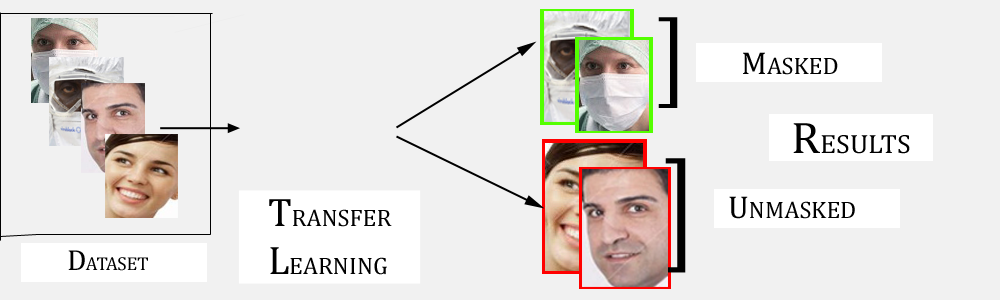
<style>
.page{position:relative;width:1000px;height:300px;background:#f1f1f1}
.page>*{position:absolute;margin:0}
.t1{font:99.9px "Cambria";color:#000000;scale:0.85 1}
.t2{font:24px "Cambria";color:#000000}
.t3{font:32px "Cambria";color:#000000}
.t4{font:26.7px "Cambria";color:#000000;scale:1.05 1}
.t5{font:44.5px "Cambria";color:#000000;scale:1.05 1}
.t6{font:125.5px "Cambria";color:#000000;scale:0.71 1}
.t7{font:40px "Cambria";color:#000000}
.t8{font:18.7px "Cambria";color:#000000}
.t9{font:29.3px "Cambria";color:#000000}
</style>
<div class="page">
<p class="t1" style="left:658px;top:17px;width:20px;height:91px">]</p>
<p class="t2" style="left:743px;top:52px;width:95px;height:23px"><span class="t3">M</span>ASKED</p>
<p class="t4" style="left:793px;top:123px;width:117px;height:31px"><span class="t5">R</span>ESULTS</p>
<p class="t6" style="left:665px;top:158px;width:21px;height:115px">]</p>
<p class="t2" style="left:729px;top:196px;width:126px;height:23px"><span class="t3">U</span>NMASKED</p>
<p class="t2" style="left:269px;top:199px;width:123px;height:76px"><span class="t7">T</span>RANSFER<br><span class="t7">L</span>EARNING</p>
<p class="t8" style="left:68px;top:250px;width:80px;height:21px"><span class="t9">D</span>ATASET</p>
</div>
